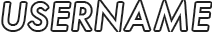
<style>
.page{position:relative;width:212px;height:32px;background:#ffffff}
.page>*{position:absolute;margin:0}
.t1{font:36.2px "Futura-MediumItalic";letter-spacing:0.05em;color:#ffffff;text-transform:uppercase}
</style>
<div class="page">
<p class="t1" style="left:3px;top:0px;width:208px;height:32px">USERNAME</p>
</div>
